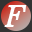
<style>
.page{position:relative;width:32px;height:32px;background:#333333}
.page>*{position:absolute;margin:0}
.t1{font:30px "News701BT-ItalicA";color:#ffffff}
</style>
<div class="page">
<p class="t1" style="left:4px;top:5px;width:23px;height:22px">F</p>
</div>
